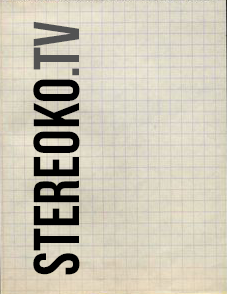
<style>
.page{position:relative;width:227px;height:294px}
.page>*{position:absolute;margin:0}
.t1{font:64.6px "BebasNeueBold";color:#000000}
.t2{font:64.6px "BebasNeueBold";color:#525252}
</style>
<div class="page">
<p class="t1" style="left:33px;top:21px;width:47px;height:254px;rotate:-90deg">Stereoko<span class="t2">.TV</span></p>
</div>
